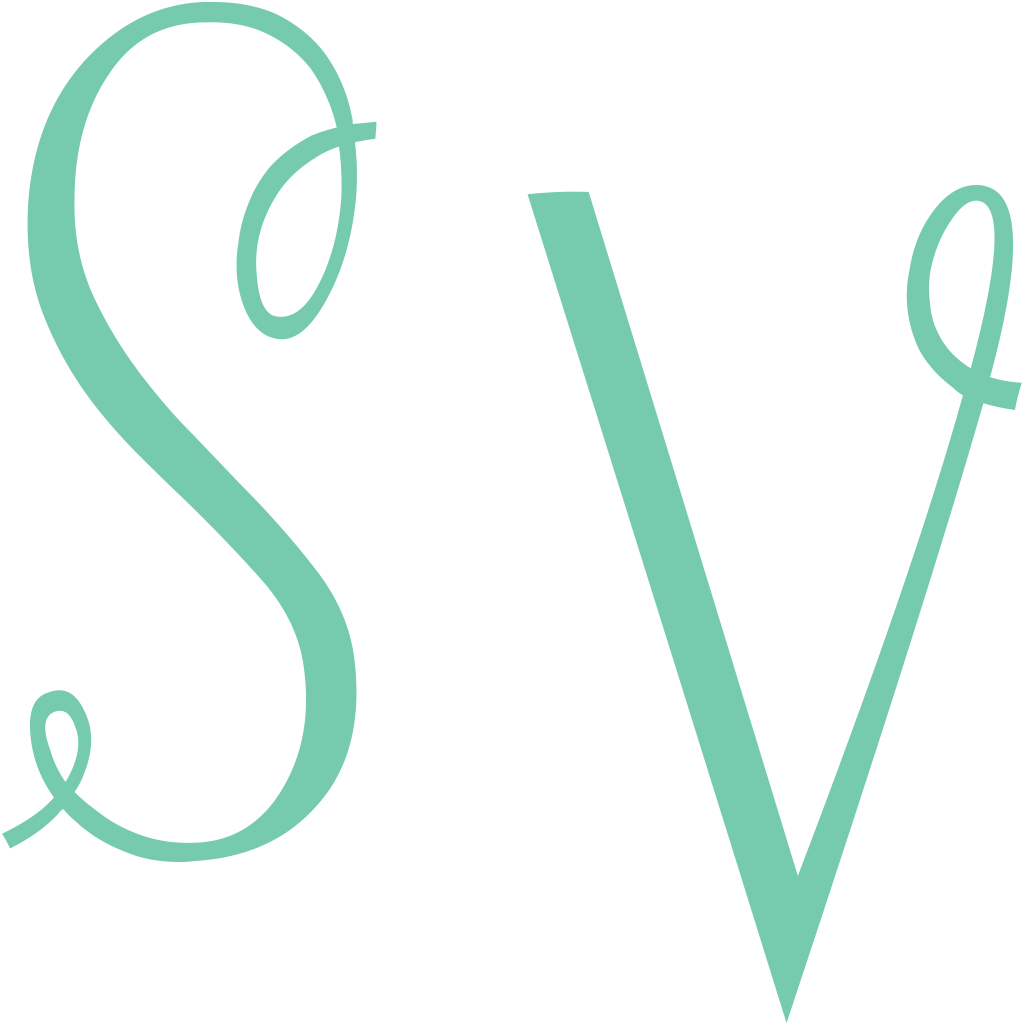
<style>
.page{position:relative;width:1024px;height:1024px;background:#ffffff}
.page>*{position:absolute;margin:0}
.t1{font:1158.3px "Strawberry_Whipped_Cream";color:#76cbae}
</style>
<div class="page">
<p class="t1" style="left:2px;top:2px;width:375px;height:860px">S</p>
<p class="t1" style="left:527px;top:185px;width:495px;height:838px">V</p>
</div>
